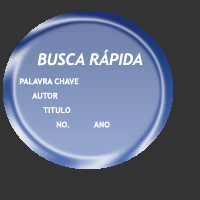
<style>
.page{position:relative;width:200px;height:200px;background:#333333}
.page>*{position:absolute;margin:0}
.t1{font:8px "TrebuchetMS-Bold";color:#ffffff}
.t2{font:16px "TrebuchetMS-Italic";color:#ffffff}
.t3{font:16px "Trebuchet-BoldItalic";color:#ffffff}
.t4{font:8px "TrebuchetMS-Italic";color:#ffffff}
</style>
<div class="page">
<p class="t1" style="left:19px;top:49px;width:124px;height:79px"><span class="t2"><br></span><span class="t3">   BUSCA RÁPIDA<br>      <br>      </span>PALAVRA CHAVE<br>                   <br>            AUTOR<br>           <br>              TITULO<br>          <br>                     NO<span class="t4">.         </span> ANO</p>
</div>
